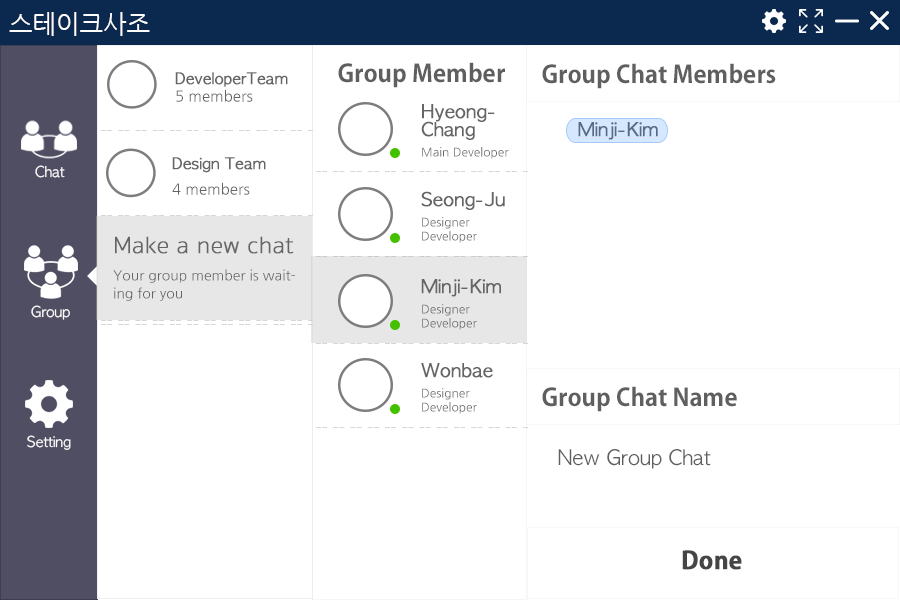
<style>
.page{position:relative;width:900px;height:600px;background:#ffffff}
.page>*{position:absolute;margin:0}
.t1{font:25px "NanumGothic";color:#fcfafa}
.t2{font:24px "AdobeGothicStd-Bold";color:#5f5f5f}
.t3{font:15px/18px "AppleGothic";color:#656565;font-weight:bold}
.t4{font:15px/8px "NanumGothic";color:#656565}
.t5{font:18px/18px "AppleGothic";color:#656565;font-weight:bold}
.t6{font:12px/8px "NanumGothic";color:#656565}
.t7{font:12px/12px "NanumGothic";color:#656565}
.t8{font:18px "AppleGothic";color:#576b86;font-weight:bold}
.t9{font:15px/14px "NanumGothic";color:#656565}
.t10{font:14px "AppleGothic";color:#fcfafa}
.t11{font:12px/14px "NanumGothic";color:#656565}
.t12{font:14px/18px "NanumGothic";color:#656565}
.t13{font:24px/18px "SukhumvitSet-Thin";color:#656565;font-weight:bold}
.t14{font:20px "AppleGothic";color:#5f5f5f}
.t15{font:24px "AdobeGothicStd-Bold";color:#454545;font-weight:bold}
</style>
<div class="page">
<p class="t1" style="left:9px;top:12px;width:141px;height:24px">스테이크사조</p>
<p class="t2" style="left:338px;top:62px;width:167px;height:26px">Group Member</p>
<p class="t2" style="left:542px;top:63px;width:234px;height:26px">Group Chat Members</p>
<p class="t3" style="left:175px;top:72px;width:113px;height:30px">DeveloperTeam<br><span class="t4">5 members</span></p>
<p class="t5" style="left:421px;top:104px;width:88px;height:55px">Hyeong-<br>Chang<br><br><span class="t6">Main Develope</span><span class="t7">r</span></p>
<p class="t8" style="left:578px;top:122px;width:80px;height:18px">Minji-Kim</p>
<p class="t3" style="left:172px;top:157px;width:94px;height:38px">Design Team<br><br><span class="t9">4 members</span></p>
<p class="t10" style="left:35px;top:165px;width:30px;height:13px">Chat</p>
<p class="t11" style="left:421px;top:191px;width:84px;height:52px"><span class="t5">Seong-Ju<br><br></span>Designer<br>Developer</p>
<p class="t12" style="left:113px;top:236px;width:182px;height:65px"><span class="t13">Make a new chat<br><br></span>Your group member is wait-<br>ing for you</p>
<p class="t11" style="left:421px;top:279px;width:80px;height:51px"><span class="t5">Minji-Kim<br><br></span>Designer<br>Developer</p>
<p class="t10" style="left:31px;top:305px;width:39px;height:15px">Group</p>
<p class="t11" style="left:421px;top:363px;width:72px;height:51px"><span class="t5">Wonbae<br><br></span>Designer<br>Developer</p>
<p class="t2" style="left:542px;top:386px;width:195px;height:26px">Group Chat Name</p>
<p class="t10" style="left:27px;top:435px;width:44px;height:15px">Setting</p>
<p class="t14" style="left:558px;top:449px;width:153px;height:20px">New Group Chat</p>
<p class="t15" style="left:682px;top:550px;width:60px;height:20px">Done</p>
</div>
